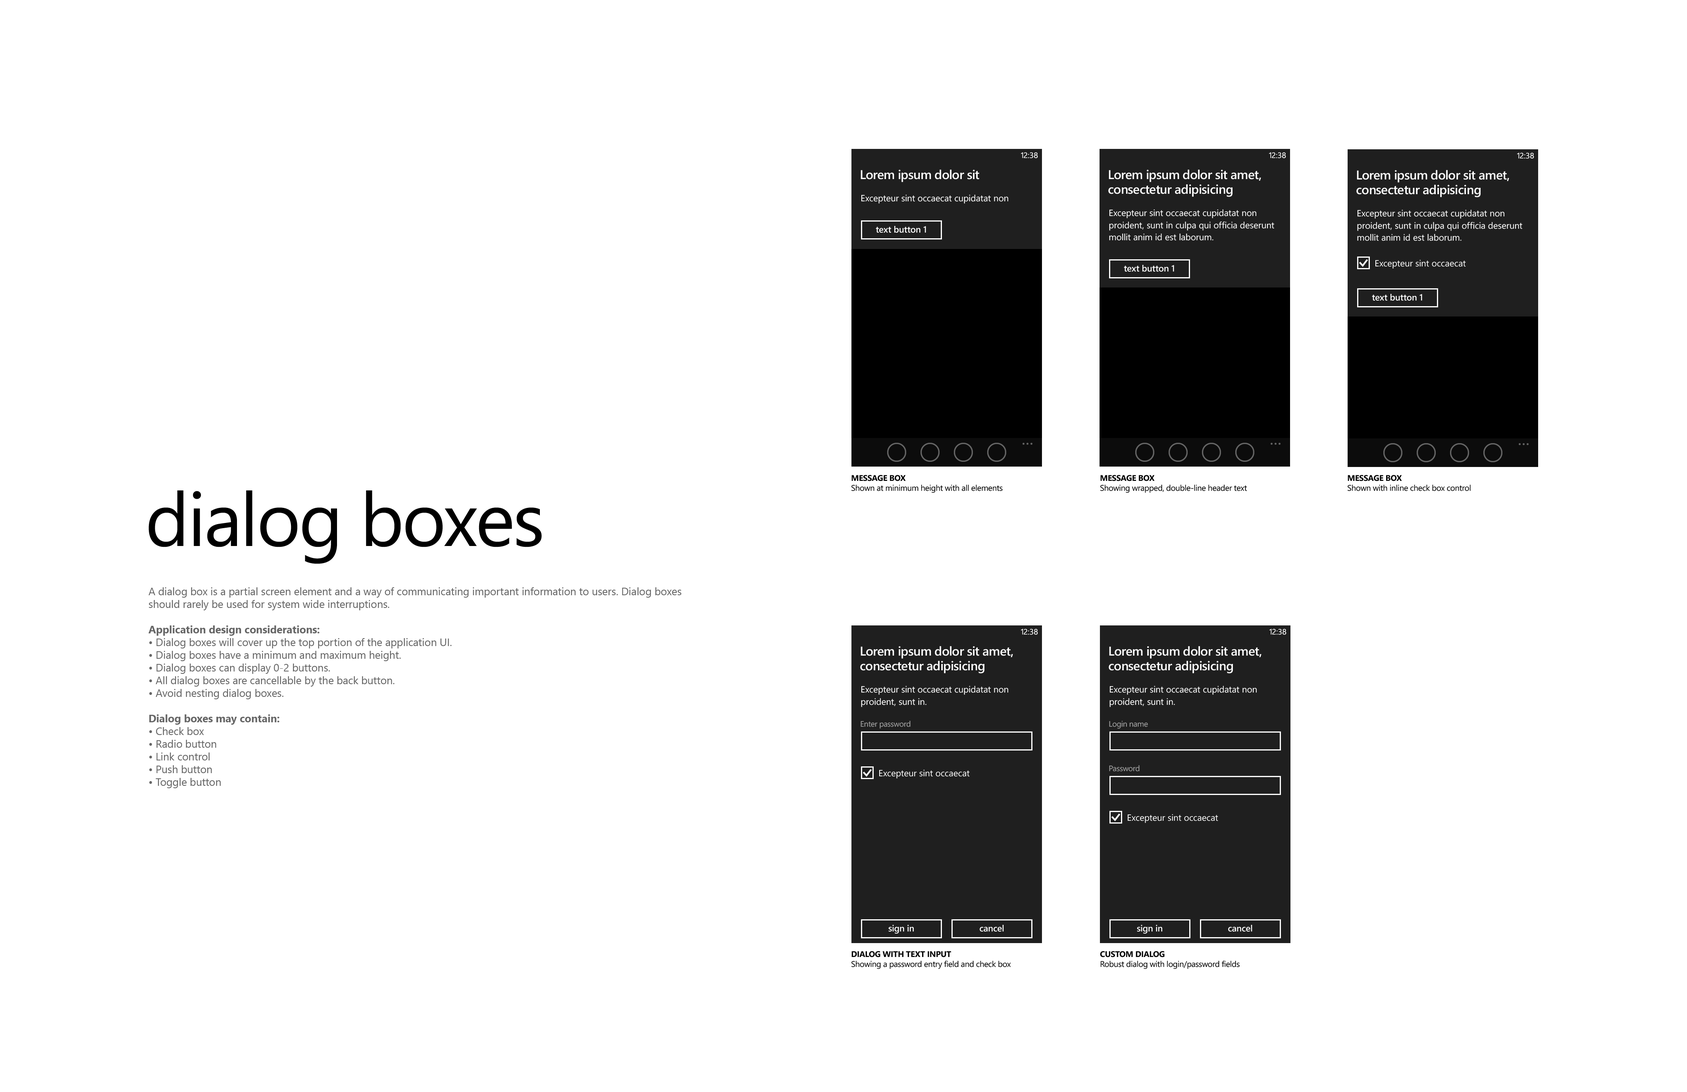
<style>
.page{position:relative;width:1687px;height:1092px;background:#ffffff}
.page>*{position:absolute;margin:0}
.t1{font:7.9px "SegoeWP";color:#ffffff}
.t2{font:7.9px "SegoeWP";letter-spacing:-0.05em;color:#ffffff}
.t3{font:12.7px "SegoeWP-Semibold";letter-spacing:-0.025em;color:#ffffff}
.t4{font:12.7px/14.8px "SegoeWP-Semibold";letter-spacing:-0.025em;color:#ffffff}
.t5{font:9px "SegoeWP";color:#ffffff}
.t6{font:9px/12.2px "SegoeWP";color:#ffffff}
.t7{font:9px "SegoeWP-Semibold";letter-spacing:-0.01em;color:#ffffff}
.t8{font:8.3px "SegoeWP";letter-spacing:-0.025em;color:#000000}
.t9{font:8.3px "SegoeWP-Bold";letter-spacing:-0.025em;color:#000000;text-transform:uppercase}
.t10{font:75.2px "SegoeWP";letter-spacing:-0.025em;color:#000000}
.t11{font:10.6px "SegoeUI";color:#666666}
.t12{font:10.6px "SegoeUI-Bold";color:#666666}
.t13{font:7.9px "SegoeWP";letter-spacing:-0.025em;color:#a5a5a5}
</style>
<div class="page">
<p class="t1" style="left:1021px;top:152px;width:17px;height:6px"><span class="t2">1</span>2:38</p>
<p class="t1" style="left:1269px;top:152px;width:17px;height:6px"><span class="t2">1</span>2:38</p>
<p class="t1" style="left:1518px;top:152px;width:17px;height:7px"><span class="t2">1</span>2:38</p>
<p class="t3" style="left:861px;top:170px;width:119px;height:12px">Lorem ipsum dolor sit</p>
<p class="t4" style="left:1109px;top:170px;width:152px;height:27px">Lorem ipsum dolor sit amet,<br>consectetur adipisicing</p>
<p class="t4" style="left:1357px;top:170px;width:153px;height:27px">Lorem ipsum dolor sit amet,<br>consectetur adipisicing</p>
<p class="t5" style="left:861px;top:195px;width:148px;height:9px">Excepteur sint occaecat cupidatat non</p>
<p class="t6" style="left:1109px;top:209px;width:166px;height:32px">Excepteur sint occaecat cupidatat non<br>proident, sunt in culpa qui officia deserunt<br>mollit anim id est laborum.</p>
<p class="t6" style="left:1358px;top:210px;width:165px;height:31px">Excepteur sint occaecat cupidatat non<br>proident, sunt in culpa qui officia deserunt<br>mollit anim id est laborum.</p>
<p class="t7" style="left:876px;top:226px;width:50px;height:7px">text button 1</p>
<p class="t7" style="left:1124px;top:265px;width:50px;height:7px">text button 1</p>
<p class="t5" style="left:1376px;top:260px;width:90px;height:9px">Excepteur sint occaecat</p>
<p class="t7" style="left:1372px;top:294px;width:51px;height:7px">text button 1</p>
<p class="t8" style="left:852px;top:475px;width:151px;height:18px"><span class="t9">MESSAGE BOX<br></span>Shown at minimum height with all elements</p>
<p class="t8" style="left:1101px;top:475px;width:147px;height:18px"><span class="t9">message box<br></span>Showing wrapped, double-line header text</p>
<p class="t8" style="left:1348px;top:475px;width:123px;height:16px"><span class="t9">message box<br></span>Shown with inline check box control</p>
<p class="t10" style="left:148px;top:490px;width:394px;height:74px">dialog boxes</p>
<p class="t11" style="left:148px;top:587px;width:534px;height:201px">A dialog box is a partial screen element and a way of communicating important information to users. Dialog boxes should rarely be used for system wide interruptions.<br><br><span class="t12">Application design considerations:<br></span>• Dialog boxes will cover up the top portion of the application UI.<br>• Dialog boxes have a minimum and maximum height.<br>• Dialog boxes can display 0-2 buttons.<br>• All dialog boxes are cancellable by the back button.<br>• Avoid nesting dialog boxes.<br><br><span class="t12">Dialog boxes may contain:<br></span>• Check box<br>• Radio button<br>• Link control<br>• Push button<br>• Toggle button</p>
<p class="t1" style="left:1021px;top:629px;width:17px;height:6px"><span class="t2">1</span>2:38</p>
<p class="t1" style="left:1270px;top:629px;width:17px;height:6px"><span class="t2">1</span>2:38</p>
<p class="t4" style="left:860px;top:646px;width:153px;height:27px">Lorem ipsum dolor sit amet,<br>consectetur adipisicing</p>
<p class="t4" style="left:1109px;top:646px;width:153px;height:27px">Lorem ipsum dolor sit amet,<br>consectetur adipisicing</p>
<p class="t6" style="left:861px;top:686px;width:148px;height:21px">Excepteur sint occaecat cupidatat non<br>proident, sunt in.</p>
<p class="t6" style="left:1110px;top:686px;width:147px;height:21px">Excepteur sint occaecat cupidatat non<br>proident, sunt in.</p>
<p class="t13" style="left:861px;top:721px;width:50px;height:8px">Enter password</p>
<p class="t13" style="left:1109px;top:721px;width:39px;height:8px">Login name</p>
<p class="t5" style="left:879px;top:769px;width:91px;height:10px">Excepteur sint occaecat</p>
<p class="t13" style="left:1109px;top:765px;width:31px;height:6px">Password</p>
<p class="t5" style="left:1128px;top:814px;width:91px;height:9px">Excepteur sint occaecat</p>
<p class="t7" style="left:889px;top:925px;width:25px;height:8px">sign in</p>
<p class="t7" style="left:980px;top:925px;width:24px;height:6px">cancel</p>
<p class="t7" style="left:1137px;top:925px;width:26px;height:8px">sign in</p>
<p class="t7" style="left:1228px;top:925px;width:25px;height:6px">cancel</p>
<p class="t8" style="left:852px;top:951px;width:159px;height:18px"><span class="t9">dialog with text input<br></span>Showing a password entry field and check box</p>
<p class="t8" style="left:1100px;top:951px;width:140px;height:18px"><span class="t9">custom dialog<br></span>Robust dialog with login/password fields</p>
</div>
